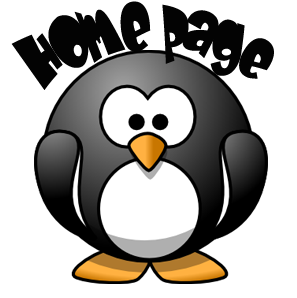
<style>
.page{position:relative;width:297px;height:298px;background:#ffffff}
.page>*{position:absolute;margin:0}
.t1{font:47.9px "BabyKruffy";color:#030303}
</style>
<div class="page">
<p class="t1" style="left:11px;top:1px;width:263px;height:89px">Home page</p>
</div>
